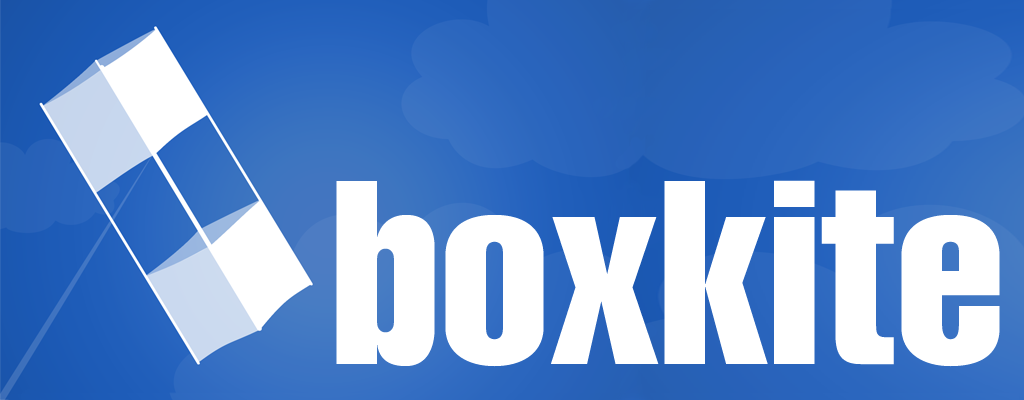
<style>
.page{position:relative;width:1024px;height:400px;background:#ffffff}
.page>*{position:absolute;margin:0}
.t1{font:256.5px "HelveticaLTStd-Comp";color:#ffffff}
</style>
<div class="page">
<p class="t1" style="left:336px;top:180px;width:664px;height:187px">boxkite</p>
</div>
